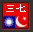
<style>
.page{position:relative;width:33px;height:32px;background:#f20000}
.page>*{position:absolute;margin:0}
.t1{font:10.4px "SimSun";color:#ffffff}
</style>
<div class="page">
<p class="t1" style="left:6px;top:4px;width:20px;height:8px">三七</p>
</div>
